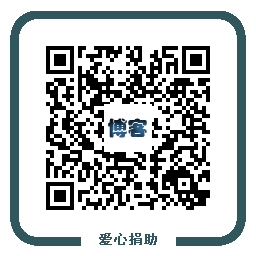
<style>
.page{position:relative;width:256px;height:256px;background:#ffffff}
.page>*{position:absolute;margin:0}
.t1{font:14px "SimHei";letter-spacing:0.005em;color:#2f575d;font-weight:bold}
</style>
<div class="page">
<p class="t1" style="left:99px;top:233px;width:58px;height:12px">爱心捐助</p>
</div>
